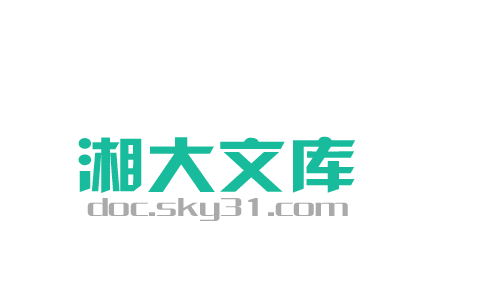
<style>
.page{position:relative;width:500px;height:300px;background:#ffffff}
.page>*{position:absolute;margin:0}
.t1{font:60px "HYk2gj";color:#18bc9c;scale:1.18 1}
.t2{font:28px "FZCQJW--GB1-0";color:#aaaaaa;scale:1.27 1}
</style>
<div class="page">
<p class="t1" style="left:78px;top:136px;width:277px;height:57px">湘大文库</p>
<p class="t2" style="left:87px;top:198px;width:261px;height:23px">doc.sky31.com</p>
</div>
